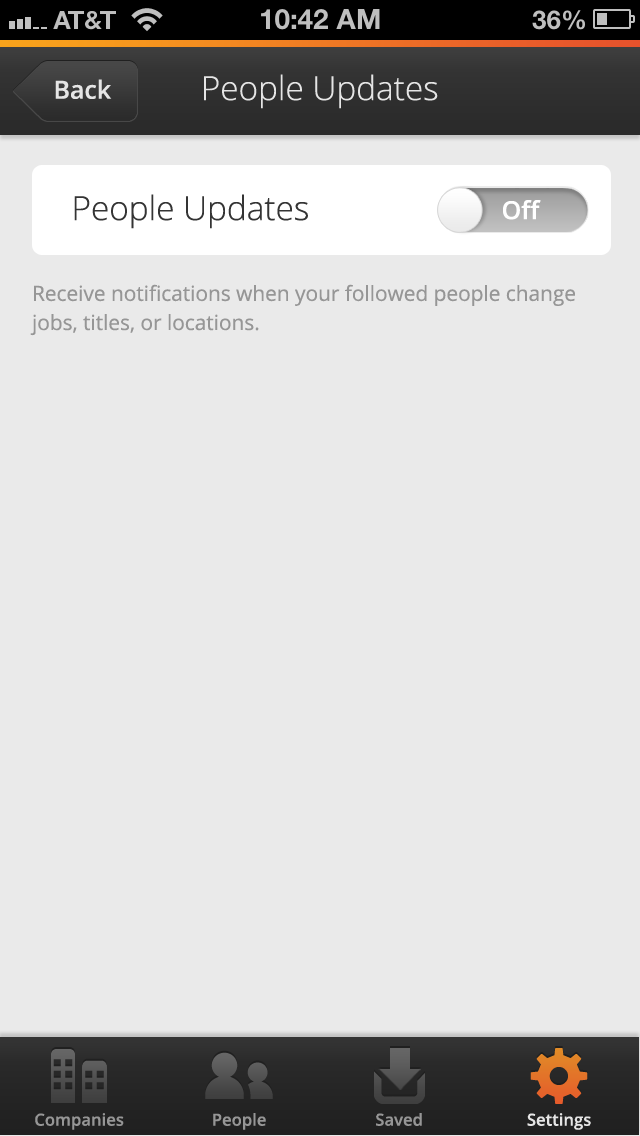
<style>
.page{position:relative;width:640px;height:1136px;background:#eaeaea}
.page>*{position:absolute;margin:0}
.t1{font:33.3px "OpenSans-Light";color:#e5e5e5}
.t2{font:25px "OpenSans-Semibold";color:#e5e5e5}
.t3{font:33.3px "OpenSans-Light";color:#343434}
.t4{font:25px "OpenSans-Semibold";color:#ffffff}
.t5{font:20.8px/29.2px "OpenSans";color:#969696}
.t6{font:16.7px "OpenSans-Semibold";color:#969696}
.t7{font:16.7px "OpenSans-Semibold";color:#e5e5e5}
</style>
<div class="page">
<p class="t1" style="left:204px;top:74px;width:234px;height:35px">People Updates</p>
<p class="t2" style="left:55px;top:79px;width:57px;height:20px">Back</p>
<p class="t3" style="left:74px;top:194px;width:234px;height:35px">People Updates</p>
<p class="t4" style="left:503px;top:200px;width:38px;height:20px">Off</p>
<p class="t5" style="left:30px;top:284px;width:545px;height:52px">Receive notifications when your followed people change jobs, titles, or locations.</p>
<p class="t6" style="left:35px;top:1113px;width:89px;height:17px">Companies</p>
<p class="t6" style="left:213px;top:1113px;width:53px;height:17px">People</p>
<p class="t6" style="left:376px;top:1113px;width:46px;height:13px">Saved</p>
<p class="t7" style="left:527px;top:1113px;width:64px;height:17px">Settings</p>
</div>
